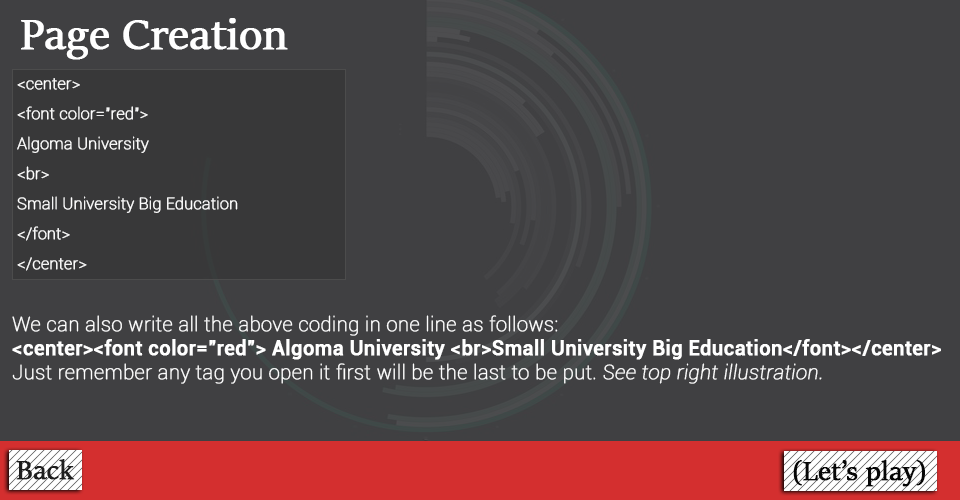
<style>
.page{position:relative;width:960px;height:500px;background:#404042}
.page>*{position:absolute;margin:0}
.t1{font:48px "SitkaBanner";color:#ffffff;font-weight:bold}
.t2{font:16px/30px "Roboto-Thin";color:#ffffff;font-weight:bold}
.t3{font:20px "Roboto-Medium";color:#ffffff;font-weight:bold}
.t4{font:20px "Roboto-Thin";color:#ffffff;font-weight:bold}
.t5{font:20px "Roboto-ThinItalic";color:#ffffff;font-weight:bold}
.t6{font:30px "SitkaBanner";color:#1e1e1e;font-weight:bold}
.t7{font:30px "SitkaBanner";color:#060606;font-weight:bold}
</style>
<div class="page">
<p class="t1" style="left:21px;top:18px;width:267px;height:42px">Page Creation</p>
<p class="t2" style="left:17px;top:78px;width:221px;height:193px">&lt;center&gt;<br>&lt;font color=”red”&gt; <br>Algoma University <br>&lt;br&gt;<br>Small University Big Education<br>&lt;/font&gt;<br>&lt;/center&gt;</p>
<p class="t3" style="left:12px;top:315px;width:929px;height:69px"><span class="t4">We can also write all the above coding in one line as follows:<br></span>&lt;center&gt;&lt;font color=”red”&gt; Algoma University &lt;br&gt;Small University Big Education&lt;/font&gt;&lt;/center&gt;<br><span class="t4">Just remember any tag you open it first will be the last to be put. </span><span class="t5">See top right illustration.</span></p>
<p class="t6" style="left:16px;top:459px;width:59px;height:21px">Back</p>
<p class="t7" style="left:793px;top:460px;width:132px;height:27px">(Let’s play)</p>
</div>
